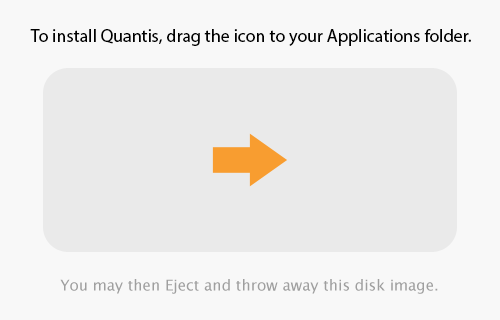
<style>
.page{position:relative;width:500px;height:320px;background:#f8f8f8}
.page>*{position:absolute;margin:0}
.t1{font:18px "MyriadPro-Regular";color:#000000}
</style>
<div class="page">
<p class="t1" style="left:30px;top:29px;width:441px;height:17px">To install Quantis, drag the icon to your Applications folder.</p>
</div>
